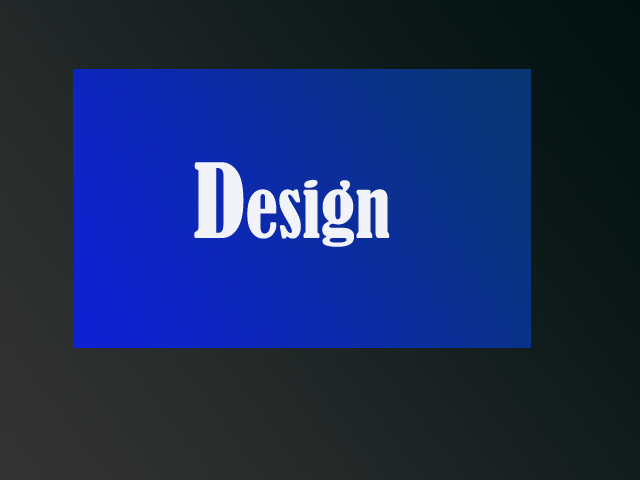
<style>
.page{position:relative;width:640px;height:480px}
.page>*{position:absolute;margin:0}
.t1{font:72px "BernardMT-Condensed";color:#f2f3f8}
.t2{font:96px "BernardMT-Condensed";color:#f2f3f8}
</style>
<div class="page">
<p class="t1" style="left:194px;top:162px;width:196px;height:85px"><span class="t2">D</span>esign</p>
</div>
